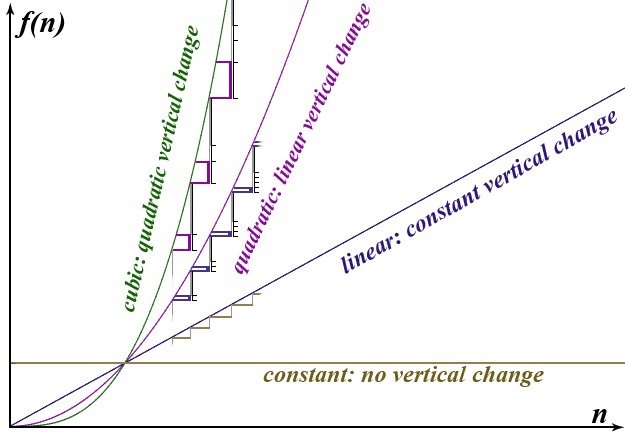
<style>
.page{position:relative;width:625px;height:440px;background:#ffffff}
.page>*{position:absolute;margin:0}
.t1{font:22px "TimesNewRomanPS-BoldItalicMT";color:#870998}
.t2{font:30px "TimesNewRomanPS-BoldItalicMT";color:#000000}
.t3{font:22px "TimesNewRomanPS-BoldItalicMT";color:#126302}
.t4{font:24px "TimesNewRomanPS-BoldItalicMT";color:#2b187e}
.t5{font:24px "TimesNewRomanPS-BoldItalicMT";color:#6e5c19}
</style>
<div class="page">
<p class="t1" style="left:235px;top:3px;width:135px;height:272px;rotate:-64deg">quadratic: linear vertical change</p>
<p class="t2" style="left:14px;top:11px;width:51px;height:27px">f(n)</p>
<p class="t3" style="left:125px;top:25px;width:75px;height:287px;rotate:-77deg">cubic: quadratic vertical change</p>
<p class="t4" style="left:340px;top:111px;width:277px;height:163px;rotate:-29deg">linear: constant vertical change</p>
<p class="t5" style="left:263px;top:366px;width:281px;height:21px">constant: no vertical change</p>
<p class="t2" style="left:591px;top:409px;width:16px;height:14px">n</p>
</div>
